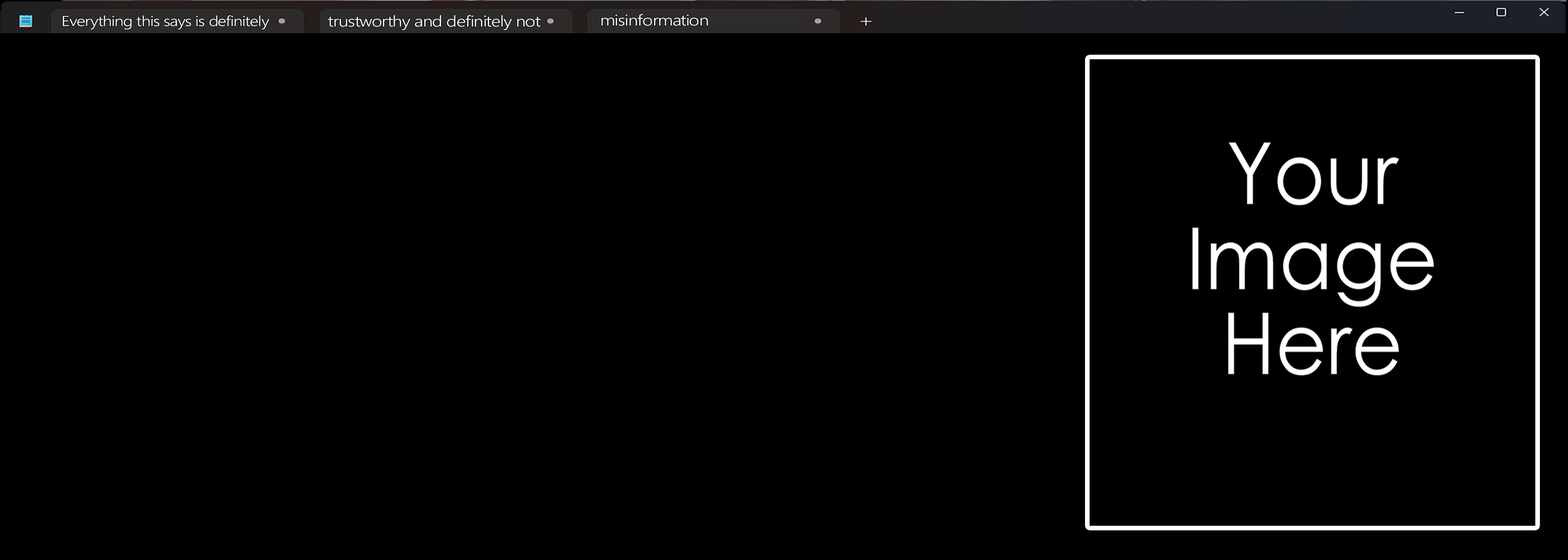
<style>
.page{position:relative;width:1568px;height:560px;background:#000000}
.page>*{position:absolute;margin:0}
.t1{font:14.3px "SegoeUI-Semilight";letter-spacing:-0.04em;color:#ffffff;scale:1.2 1}
.t2{font:15.3px "SegoeUI-Semilight";letter-spacing:-0.04em;color:#ffffff;scale:1.2 1}
</style>
<div class="page">
<p class="t1" style="left:63px;top:15px;width:207px;height:15px">Everything this says is definitely</p>
<p class="t2" style="left:328px;top:15px;width:213px;height:15px">trustworthy and definitely not</p>
<p class="t2" style="left:601px;top:14px;width:107px;height:12px">misinformation</p>
</div>
